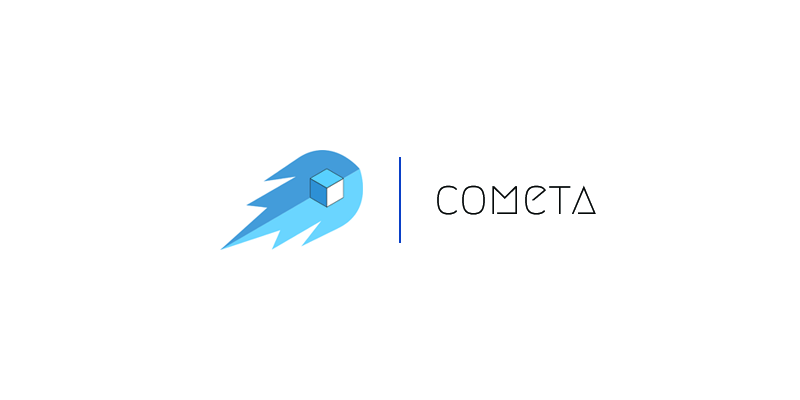
<style>
.page{position:relative;width:800px;height:400px;background:#ffffff}
.page>*{position:absolute;margin:0}
.t1{font:47.8px "Megrim";color:#060808}
</style>
<div class="page">
<p class="t1" style="left:437px;top:185px;width:159px;height:30px">cometa</p>
</div>
